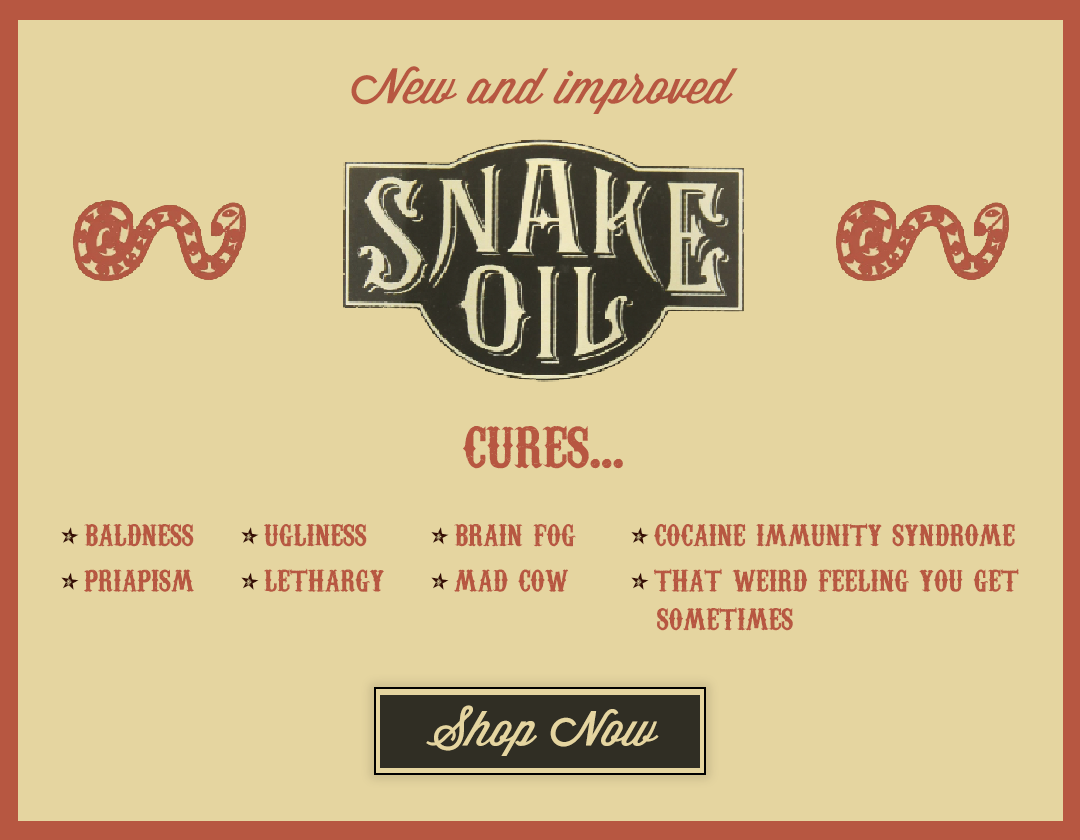
<style>
.page{position:relative;width:1080px;height:840px;background:#e5d5a0}
.page>*{position:absolute;margin:0}
.t1{font:48.6px "WisdomScriptAI";color:#b75741}
.t2{font:72px "CarnivaleeFreakshow";color:#b75741}
.t3{font:38px "CarnivaleeFreakshow";color:#b75741}
.t4{font:38px "CarnivaleeFreakshow";color:#360e05}
.t5{font:48px "WisdomScriptAI";color:#e5d5a0}
</style>
<div class="page">
<p class="t1" style="left:351px;top:66px;width:387px;height:48px">New and improved</p>
<p class="t2" style="left:463px;top:425px;width:160px;height:44px">cures...</p>
<p class="t3" style="left:61px;top:524px;width:133px;height:68px"><span class="t4">• </span>baldness<br><span class="t4">• </span>priapism</p>
<p class="t3" style="left:241px;top:524px;width:143px;height:68px"><span class="t4">• </span>ugliness<br><span class="t4">• </span>lethargy</p>
<p class="t3" style="left:431px;top:524px;width:145px;height:68px"><span class="t4">• </span>brain fog<br><span class="t4">• </span>mad cow</p>
<p class="t3" style="left:631px;top:523px;width:388px;height:69px"><span class="t4">• </span>cocaine immunity syndrome<br><span class="t4">• </span>that weird feeling you get</p>
<p class="t3" style="left:657px;top:607px;width:136px;height:24px">sometimes</p>
<p class="t5" style="left:426px;top:705px;width:233px;height:51px">Shop Now</p>
</div>
